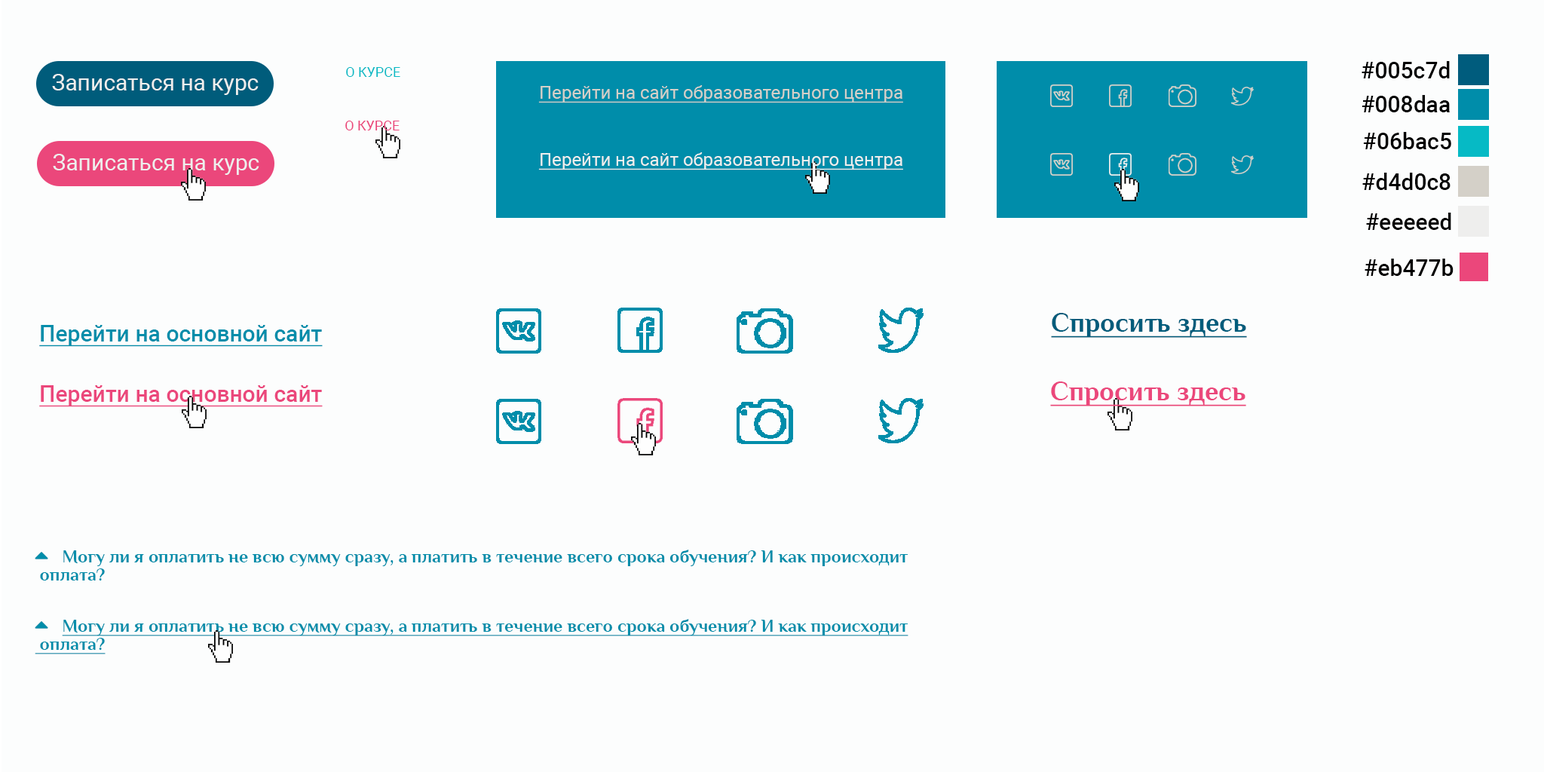
<style>
.page{position:relative;width:1544px;height:772px;background:#fcfdfd}
.page>*{position:absolute;margin:0}
.t1{font:22.6px "Roboto-Medium";color:#000000}
.t2{font:22.6px "Roboto-Regular";color:#eeeeed}
.t3{font:13.6px "Roboto-Regular";color:#06bac5}
.t4{font:18.1px "Roboto-Regular";color:#d4d0c8;text-decoration:underline}
.t5{font:13.6px "Roboto-Regular";color:#eb477b}
.t6{font:18.1px "Roboto-Regular";color:#eeeeed;text-decoration:underline}
.t7{font:27.1px "Philosopher-Bold";color:#005c7b;text-decoration:underline}
.t8{font:22.6px "Roboto-Medium";color:#008daa;text-decoration:underline}
.t9{font:22.6px "Roboto-Medium";color:#eb477b;text-decoration:underline}
.t10{font:27.1px "Philosopher-Bold";color:#eb477b;text-decoration:underline}
</style>
<div class="page">
<p class="t1" style="left:1362px;top:61px;width:88px;height:17px">#005c7d</p>
<p class="t2" style="left:52px;top:74px;width:207px;height:21px">Записаться на курс</p>
<p class="t3" style="left:346px;top:67px;width:54px;height:10px">О КУРСЕ</p>
<p class="t4" style="left:538px;top:85px;width:365px;height:18px">Перейти на сайт образовательного центра</p>
<p class="t1" style="left:1362px;top:95px;width:88px;height:17px">#008daa</p>
<p class="t5" style="left:345px;top:121px;width:55px;height:9px">О КУРСЕ</p>
<p class="t1" style="left:1363px;top:132px;width:89px;height:17px">#06bac5</p>
<p class="t2" style="left:53px;top:154px;width:206px;height:21px">Записаться на курс</p>
<p class="t6" style="left:538px;top:152px;width:365px;height:18px">Перейти на сайт образовательного центра</p>
<p class="t1" style="left:1363px;top:173px;width:88px;height:17px">#d4d0c8</p>
<p class="t1" style="left:1366px;top:213px;width:86px;height:17px">#eeeeed</p>
<p class="t1" style="left:1365px;top:259px;width:89px;height:17px">#eb477b</p>
<p class="t7" style="left:1051px;top:313px;width:196px;height:25px">Спросить здесь</p>
<p class="t8" style="left:39px;top:325px;width:284px;height:22px">Перейти на основной сайт</p>
<p class="t9" style="left:39px;top:385px;width:284px;height:22px">Перейти на основной сайт</p>
<p class="t10" style="left:1050px;top:382px;width:196px;height:24px">Спросить здесь</p>
</div>
